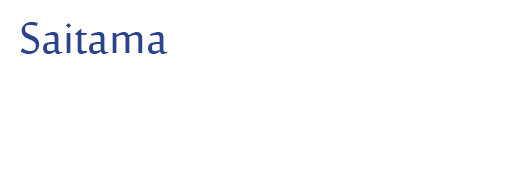
<style>
.page{position:relative;width:524px;height:192px;background:#ffffff}
.page>*{position:absolute;margin:0}
.t1{font:60px "SakkalMajalla";color:#2b438e}
</style>
<div class="page">
<p class="t1" style="left:20px;top:22px;width:148px;height:32px">Saitama</p>
</div>
